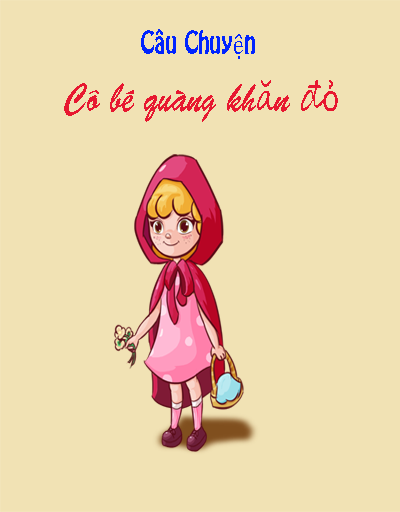
<style>
.page{position:relative;width:400px;height:512px;background:#f1e2b4}
.page>*{position:absolute;margin:0}
.t1{font:28px "HoboStd";color:#0024ff;scale:0.78 1}
.t2{font:28px "Cambria";color:#0024ff;scale:0.78 1}
.t3{font:40px "BrushScriptStd";color:#e71830;scale:0.78 1}
.t4{font:40px "SegoeScript";color:#e71830;scale:0.78 1}
.t5{font:40px "Consolas";color:#e71830;scale:0.78 1}
</style>
<div class="page">
<p class="t1" style="left:141px;top:29px;width:114px;height:30px">Câu Chuy<span class="t2">ệ</span>n</p>
<p class="t3" style="left:64px;top:80px;width:274px;height:42px">Cô bé quàng kh<span class="t4">ă</span>n <span class="t4">đ</span><span class="t5">ỏ</span></p>
</div>
